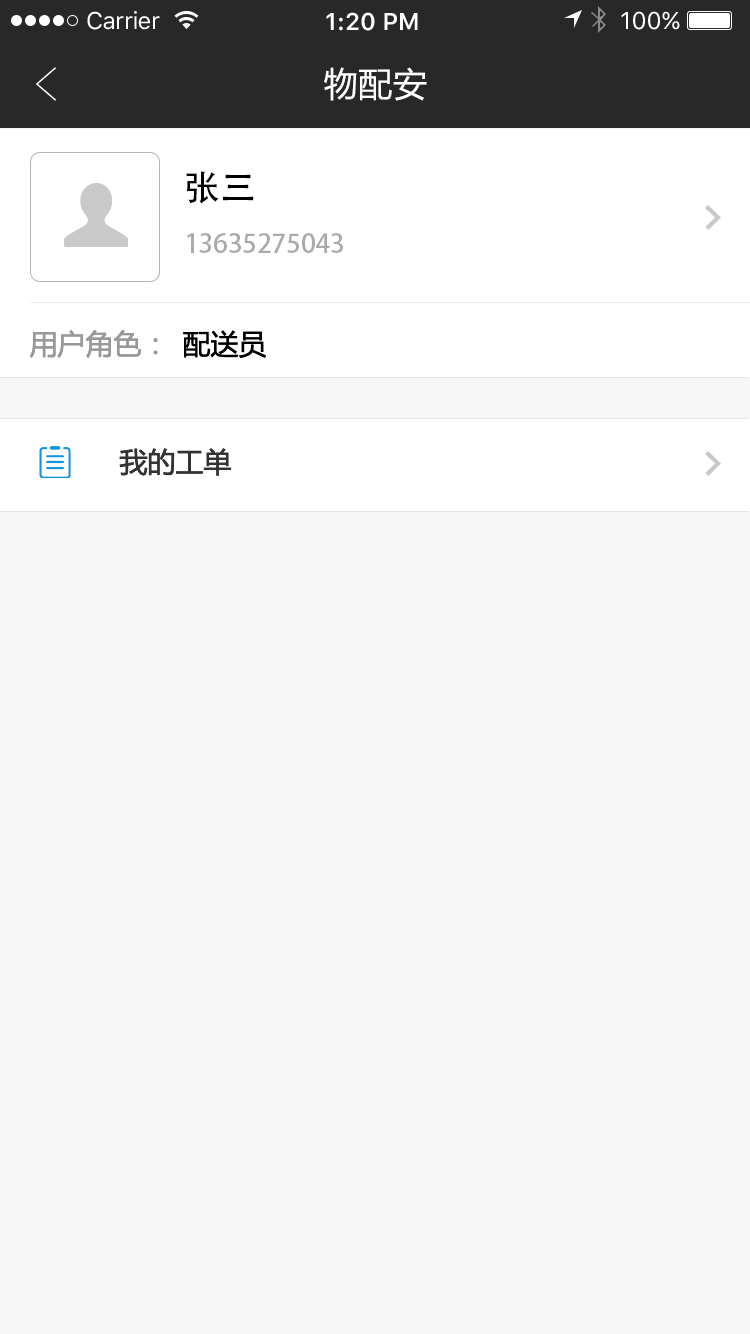
<style>
.page{position:relative;width:750px;height:1334px;background:#f6f6f6}
.page>*{position:absolute;margin:0}
.t1{font:24px "SFUIText-Regular";letter-spacing:-0.025em;color:#ffffff}
.t2{font:24px "SFUIText-Semibold";color:#ffffff}
.t3{font:24px "SFUIText-Regular";color:#ffffff}
.t4{font:34px "MicrosoftYaHei";letter-spacing:0.02em;color:#ffffff}
.t5{font:36px "AdobeHeitiStd-Regular";color:#000000}
.t6{font:26px "AdobeHeitiStd-Regular";color:#aaaaaa}
.t7{font:28px "MicrosoftYaHei";color:#999999}
.t8{font:28px "MicrosoftYaHei";color:#000000}
.t9{font:28px "MicrosoftYaHei";color:#333333}
</style>
<div class="page">
<p class="t1" style="left:87px;top:11px;width:73px;height:19px">Carrier</p>
<p class="t2" style="left:326px;top:12px;width:92px;height:19px">1:20 PM</p>
<p class="t3" style="left:621px;top:11px;width:59px;height:19px">100%</p>
<p class="t4" style="left:324px;top:67px;width:103px;height:34px">物配安</p>
<p class="t5" style="left:186px;top:171px;width:68px;height:33px">张三</p>
<p class="t6" style="left:187px;top:233px;width:156px;height:20px">13635275043</p>
<p class="t7" style="left:30px;top:330px;width:128px;height:28px">用户角色：</p>
<p class="t8" style="left:183px;top:330px;width:84px;height:28px">配送员</p>
<p class="t9" style="left:119px;top:448px;width:113px;height:28px">我的工单</p>
</div>
